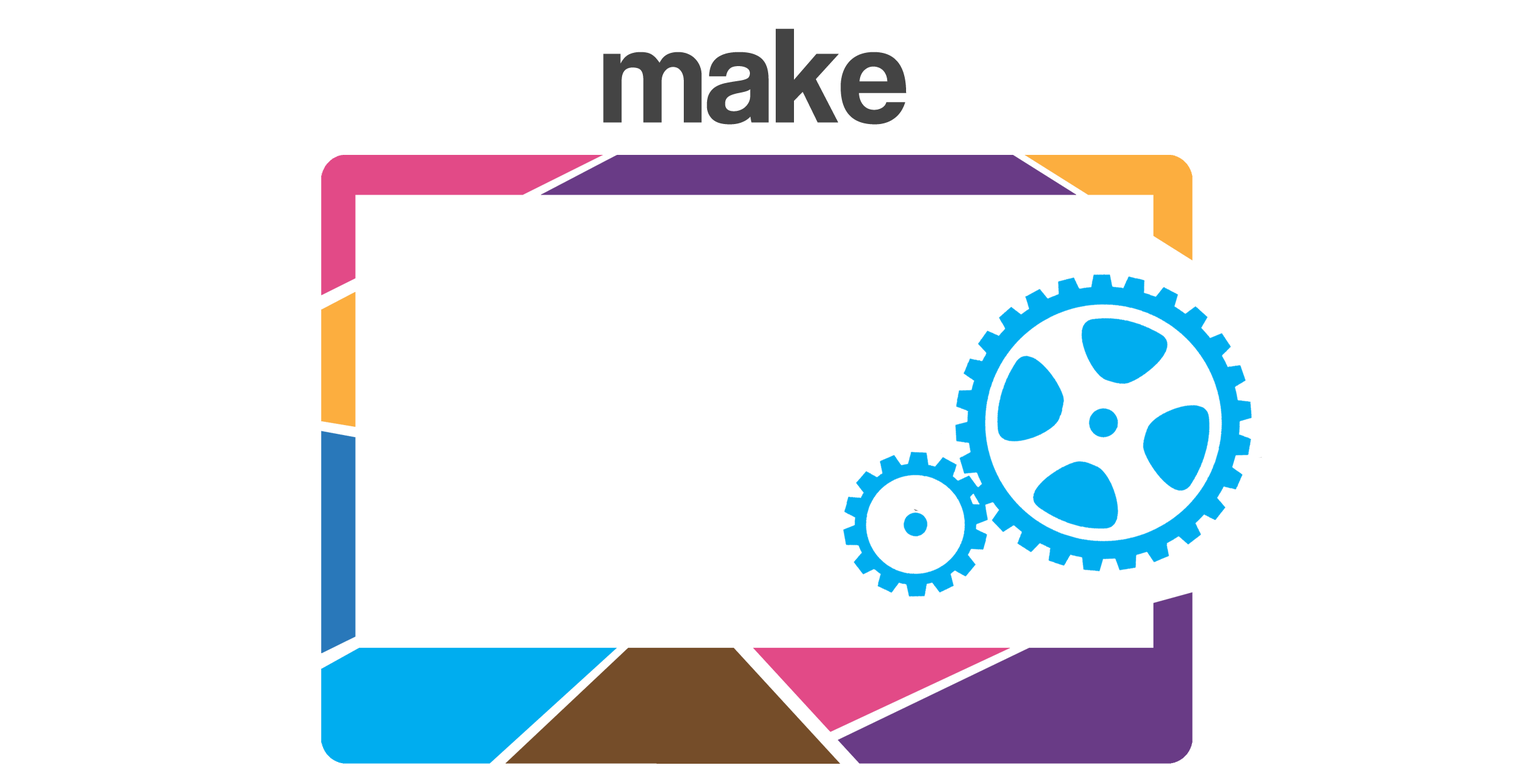
<style>
.page{position:relative;width:1525px;height:782px;background:#ffffff}
.page>*{position:absolute;margin:0}
.t1{font:139.2px "CoolveticaRg-Regular";color:#444444}
</style>
<div class="page">
<p class="t1" style="left:603px;top:28px;width:304px;height:97px">make</p>
</div>
